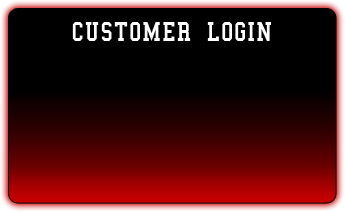
<style>
.page{position:relative;width:345px;height:212px;background:#000000}
.page>*{position:absolute;margin:0}
.t1{font:40px "CollegeSemiCondensed";letter-spacing:0.025em;color:#ffffff;font-variant:small-caps}
</style>
<div class="page">
<p class="t1" style="left:72px;top:22px;width:199px;height:19px">customer login</p>
</div>
